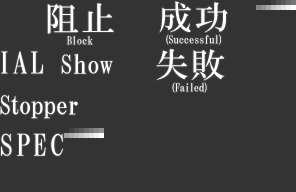
<style>
.page{position:relative;width:296px;height:192px;background:#333333}
.page>*{position:absolute;margin:0}
.t1{font:11px/14px "HGMinchoB";color:#ffffff}
.t2{font:34px/24px "HGMinchoB";letter-spacing:0.075em;color:#ffffff}
.t3{font:11px/15px "HGMinchoB";letter-spacing:-0.025em;color:#ffffff}
.t4{font:33px/24px "HGMinchoB";letter-spacing:0.075em;color:#ffffff;scale:1.03 1}
.t5{font:30px "HGMinchoB";letter-spacing:0.075em;color:#ffffff}
.t6{font:26px "HGMinchoB";letter-spacing:0.01em;color:#ffffff}
.t7{font:26px "HGMinchoB";letter-spacing:-0.025em;color:#ffffff}
.t8{font:26px "HGMinchoB";letter-spacing:-0.075em;color:#ffffff}
.t9{font:30px "HGMinchoB";letter-spacing:0.1em;color:#ffffff}
</style>
<div class="page">
<p class="t1" style="left:47px;top:3px;width:67px;height:42px;text-align:center"><span class="t2">阻止<br></span>Block</p>
<p class="t3" style="left:159px;top:1px;width:69px;height:44px;text-align:center"><span class="t4">成功<br></span>(Successful)</p>
<p class="t5" style="left:1px;top:51px;width:42px;height:23px">IAL</p>
<p class="t6" style="left:61px;top:53px;width:52px;height:21px">Show</p>
<p class="t3" style="left:156px;top:49px;width:69px;height:44px;text-align:center"><span class="t2">失敗<br></span>(Failed)</p>
<p class="t7" style="left:0px;top:95px;width:78px;height:24px"><span class="t8">St</span>opper</p>
<p class="t9" style="left:1px;top:133px;width:62px;height:23px">SPEC</p>
</div>
